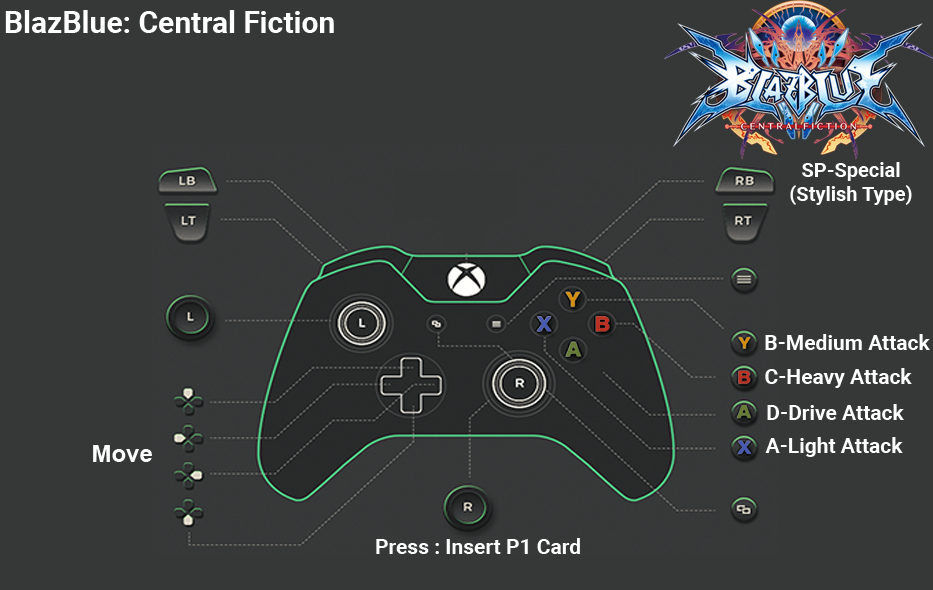
<style>
.page{position:relative;width:933px;height:590px;background:#363838}
.page>*{position:absolute;margin:0}
.t1{font:30px "Roboto-Bold";color:#ffffff}
.t2{font:20px/24px "Roboto-Bold";color:#ffffff}
.t3{font:21px "Roboto-Bold";color:#ffffff}
.t4{font:24px "Arial-BoldMT";color:#fefefe}
</style>
<div class="page">
<p class="t1" style="left:5px;top:10px;width:329px;height:23px">BlazBlue: Central Fiction</p>
<p class="t2" style="left:790px;top:162px;width:122px;height:43px;text-align:center">SP-Special<br>(Stylish Type)</p>
<p class="t3" style="left:765px;top:334px;width:165px;height:16px">B-Medium Attack</p>
<p class="t3" style="left:765px;top:368px;width:147px;height:20px">C-Heavy Attack</p>
<p class="t3" style="left:767px;top:404px;width:137px;height:16px">D-Drive Attack</p>
<p class="t3" style="left:765px;top:437px;width:138px;height:20px">A-Light Attack</p>
<p class="t4" style="left:93px;top:445px;width:59px;height:17px">Move</p>
<p class="t3" style="left:376px;top:538px;width:204px;height:16px">Press : Insert P1 Card</p>
</div>
